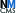
<style>
.page{position:relative;width:16px;height:14px;background:#ffffff}
.page>*{position:absolute;margin:0}
.t1{font:11.2px "Arial-BoldMT";color:#070809}
.t2{font:11.2px "Arial-BoldMT";color:#1268cb}
.t3{font:6.5px "TrajanPro-Regular";color:#425051}
</style>
<div class="page">
<p class="t1" style="left:0px;top:0px;width:8px;height:8px">N</p>
<p class="t2" style="left:7px;top:0px;width:9px;height:8px">M</p>
<p class="t3" style="left:0px;top:8px;width:16px;height:5px">CMS</p>
</div>
